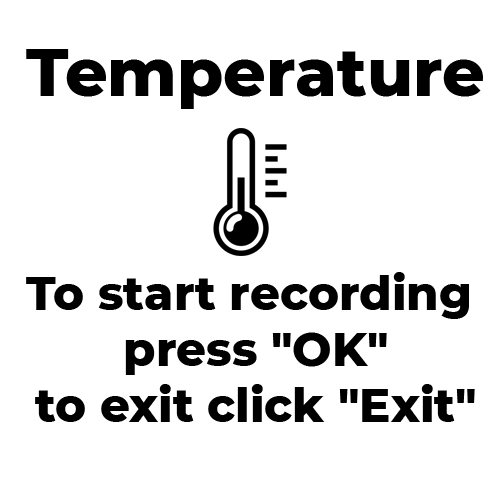
<style>
.page{position:relative;width:500px;height:500px;background:#ffffff}
.page>*{position:absolute;margin:0}
.t1{font:66.7px "Montserrat-ExtraBold";color:#000000}
.t2{font:46.7px "Montserrat-ExtraBold";color:#000000}
</style>
<div class="page">
<p class="t1" style="left:26px;top:49px;width:457px;height:60px">Temperature</p>
<p class="t2" style="left:26px;top:272px;width:449px;height:150px;text-align:center">To start recording<br> press "OK"<br> to exit click "Exit"</p>
</div>
